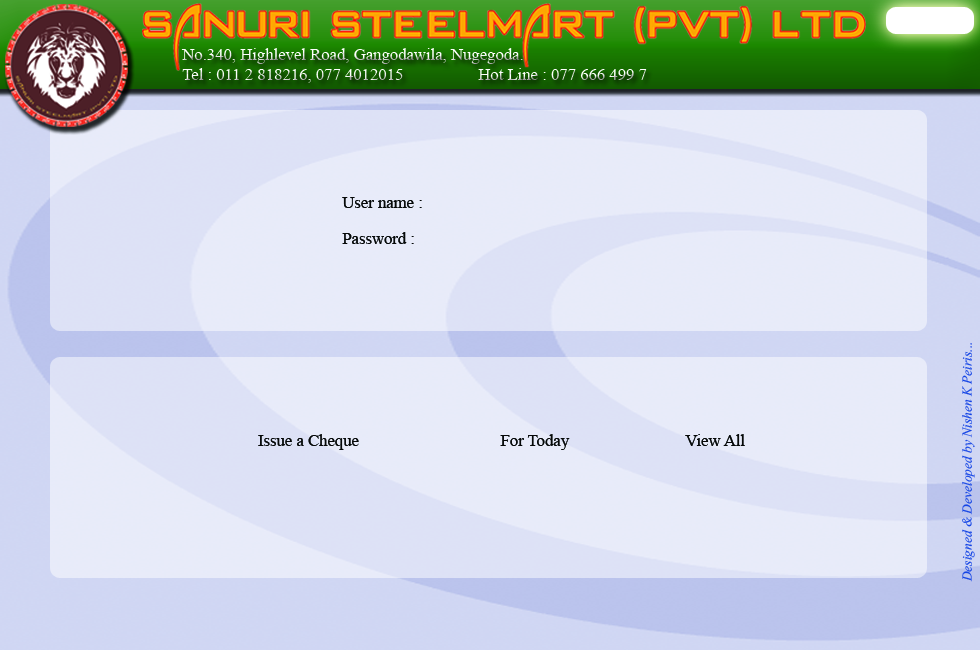
<style>
.page{position:relative;width:980px;height:650px;background:#e8ebf9}
.page>*{position:absolute;margin:0}
.t1{font:16.6px "TimesNewRomanPSMT"}
.t2{font:16.7px/18px "TimesNewRomanPSMT";color:#060808}
.t3{font:16.7px "Vijaya";color:#1546e5}
.t4{font:16.7px "TimesNewRomanPSMT";color:#060808}
</style>
<div class="page">
<p class="t1" style="left:181px;top:48px;width:342px;height:16px">No.340, Highlevel Road, Gangodawila, Nugegoda.</p>
<p class="t1" style="left:182px;top:68px;width:221px;height:15px">Tel : 011 2 818216, 077 4012015</p>
<p class="t1" style="left:478px;top:68px;width:169px;height:12px">Hot Line : 077 666 499 7</p>
<p class="t2" style="left:342px;top:197px;width:80px;height:47px">User name :<br><br>Password :</p>
<p class="t3" style="left:962px;top:343px;width:13px;height:239px;rotate:-90deg">Designed &amp; Developed by Nishen K Peiris...</p>
<p class="t4" style="left:258px;top:434px;width:487px;height:16px">Issue a Cheque                                  For Today                            View All</p>
</div>
